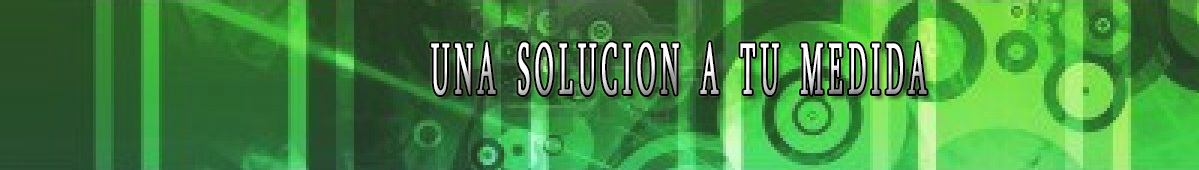
<style>
.page{position:relative;width:1199px;height:170px}
.page>*{position:absolute;margin:0}
.t1{font:180px "Sylfaen";letter-spacing:0.2em;font-variant:small-caps;font-weight:bold;scale:0.33 1}
</style>
<div class="page">
<p class="t1" style="left:431px;top:42px;width:496px;height:53px">una solucion a tu medida</p>
</div>
